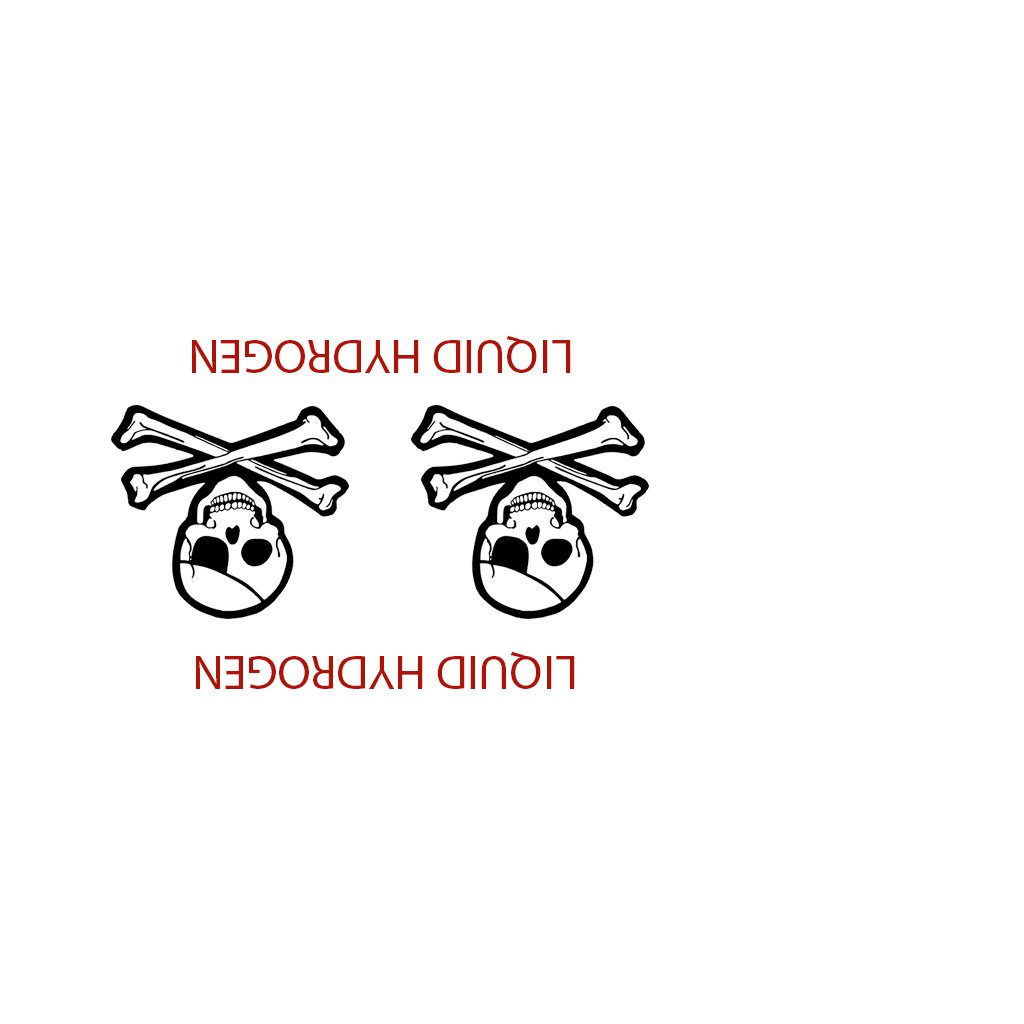
<style>
.page{position:relative;width:1024px;height:1024px;background:#ffffff}
.page>*{position:absolute;margin:0}
.t1{font:48px "MyriadPro-Regular";color:#b01207}
</style>
<div class="page">
<p class="t1" style="left:192px;top:335px;width:379px;height:38px;rotate:180deg">LIQUID HYDROGEN</p>
<p class="t1" style="left:196px;top:651px;width:379px;height:38px;rotate:180deg">LIQUID HYDROGEN</p>
</div>
